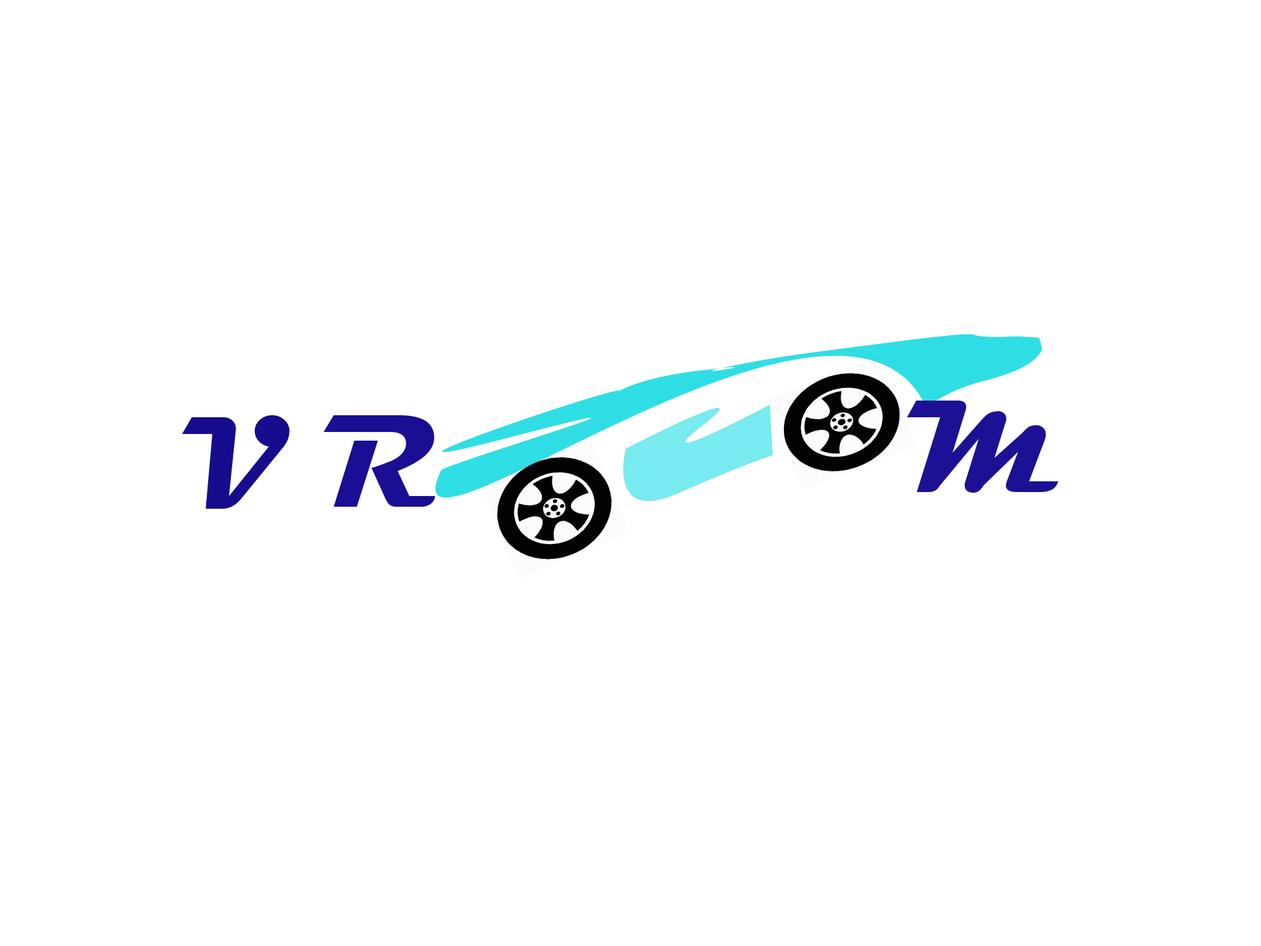
<style>
.page{position:relative;width:1261px;height:946px;background:#ffffff}
.page>*{position:absolute;margin:0}
.t1{font:133.5px "Magneto-Bold";color:#1c1194}
.t2{font:133.5px "Magneto-Bold";color:#170c8e}
.t3{font:200.2px "MyriadPro-Regular";color:#b91414}
.t4{font:133.5px "Magneto-Bold";color:#190e94}
</style>
<div class="page">
<p class="t1" style="left:907px;top:400px;width:151px;height:92px">M</p>
<p class="t2" style="left:182px;top:415px;width:108px;height:93px"><span class="t3"><br></span>V</p>
<p class="t4" style="left:324px;top:415px;width:111px;height:91px">R</p>
</div>
